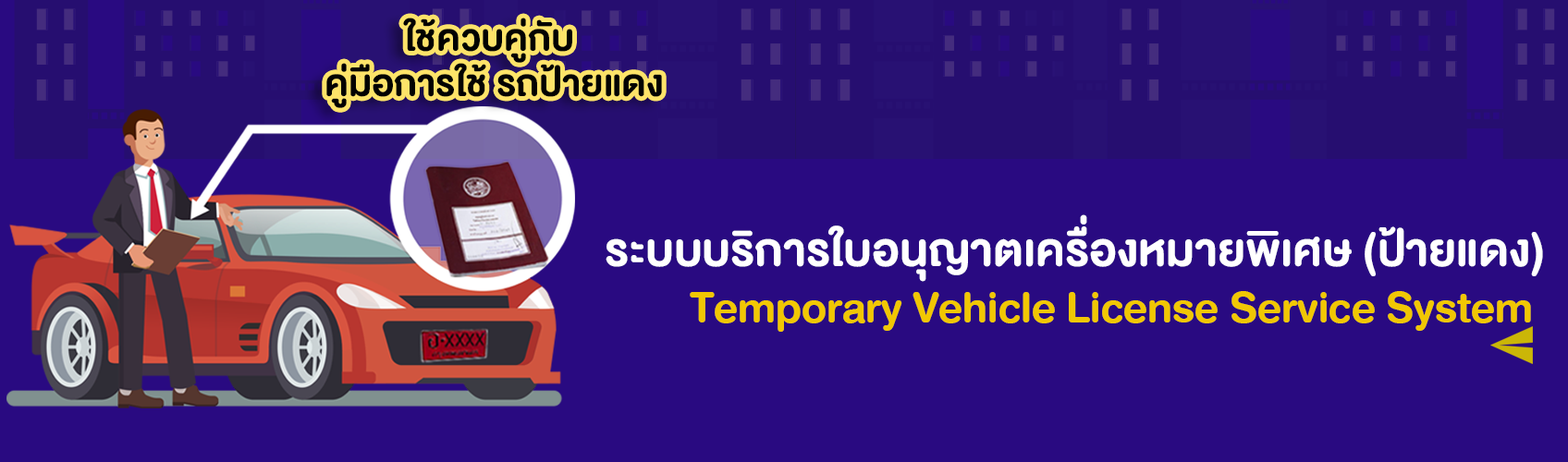
<style>
.page{position:relative;width:1568px;height:462px;background:#290a81}
.page>*{position:absolute;margin:0}
.t1{font:52.4px/45.6px "DBHelvethaicaMonX-75Bd";color:#020202}
.t2{font:64.7px "DBHelvethaicaMonX-75Bd";color:#ffffff}
.t3{font:61.9px "DBHelvethaicaMonX-75Bd";color:#f1c703}
</style>
<div class="page">
<p class="t1" style="left:326px;top:18px;width:336px;height:90px;text-align:center">ใช้ควบคู่กับ <br>คู่มือการใช้ รถป้ายแดง</p>
<p class="t2" style="left:606px;top:214px;width:937px;height:68px">ระบบบริการใบอนุญาตเครื่องหมายพิเศษ (ป้ายแดง)</p>
<p class="t3" style="left:690px;top:291px;width:841px;height:41px">Temporary Vehicle License Service System</p>
</div>
